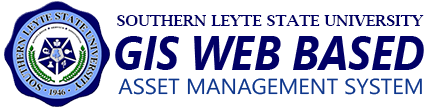
<style>
.page{position:relative;width:432px;height:108px;background:#ffffff}
.page>*{position:absolute;margin:0}
.t1{font:15.5px "LucidaBright-Demi";color:#010066}
.t2{font:48.3px "SegoeUI-BoldItalic";color:#010066;scale:0.86 1}
.t3{font:21.7px "SegoeUI";color:#0d368c;scale:1.03 1}
</style>
<div class="page">
<p class="t1" style="left:117px;top:15px;width:307px;height:11px">SOUTHERN LEYTE STATE UNIVERSITY</p>
<p class="t2" style="left:115px;top:36px;width:309px;height:34px">GIS WEB BASED</p>
<p class="t3" style="left:118px;top:78px;width:304px;height:17px">ASSET MANAGEMENT SYSTEM</p>
</div>
